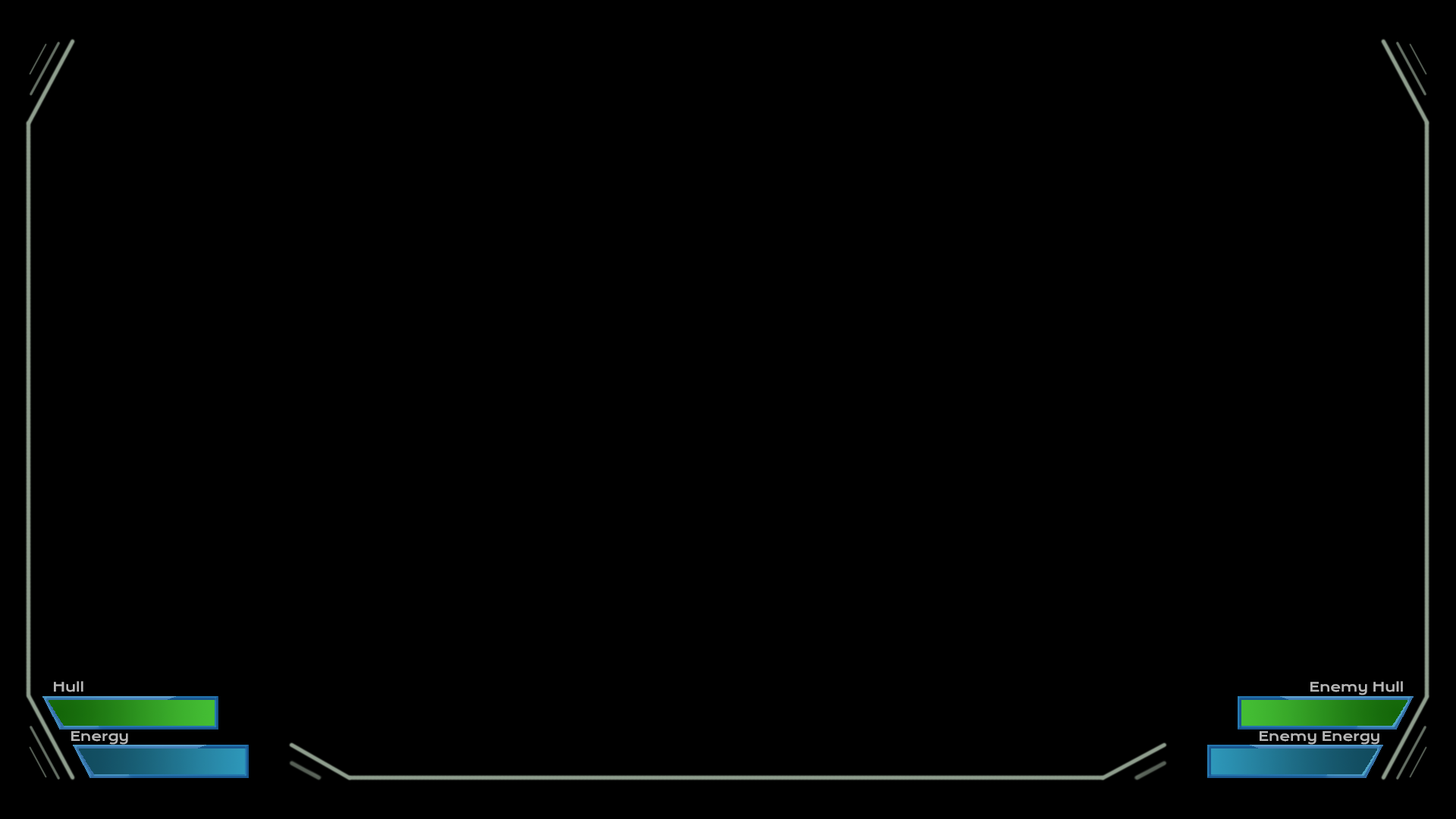
<style>
.page{position:relative;width:1456px;height:819px;background:#000000}
.page>*{position:absolute;margin:0}
.t1{font:12.6px "KronaOne-Regular";color:#b7b7b7}
</style>
<div class="page">
<p class="t1" style="left:54px;top:681px;width:29px;height:11px">Hull</p>
<p class="t1" style="left:1310px;top:681px;width:93px;height:14px">Enemy Hull</p>
<p class="t1" style="left:71px;top:731px;width:57px;height:14px">Energy</p>
<p class="t1" style="left:1260px;top:731px;width:119px;height:14px">Enemy Energy</p>
</div>
